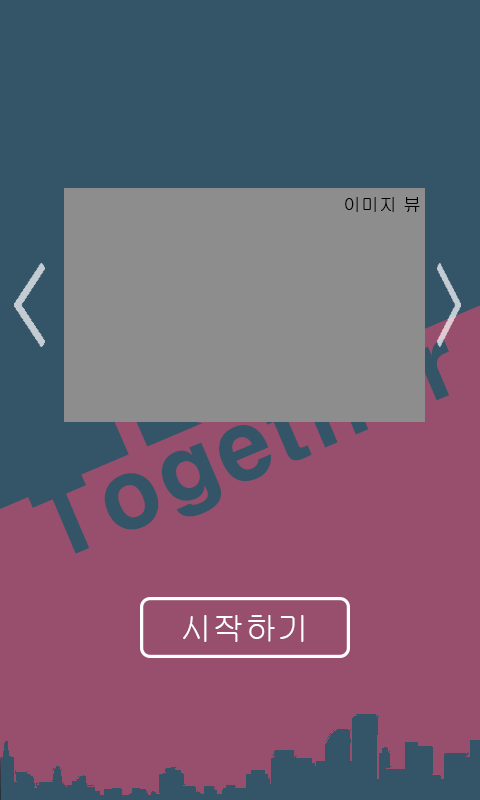
<style>
.page{position:relative;width:480px;height:800px;background:#984f6d}
.page>*{position:absolute;margin:0}
.t1{font:18px "Gulim";color:#000000}
.t2{font:93.7px "HYgtrE";color:#345467}
.t3{font:32.7px "Gulim";color:#ffffff}
</style>
<div class="page">
<p class="t1" style="left:345px;top:197px;width:75px;height:15px">이미지 뷰</p>
<p class="t2" style="left:27px;top:338px;width:423px;height:216px;rotate:-23deg">Together</p>
<p class="t3" style="left:183px;top:615px;width:121px;height:27px">시작하기</p>
</div>
